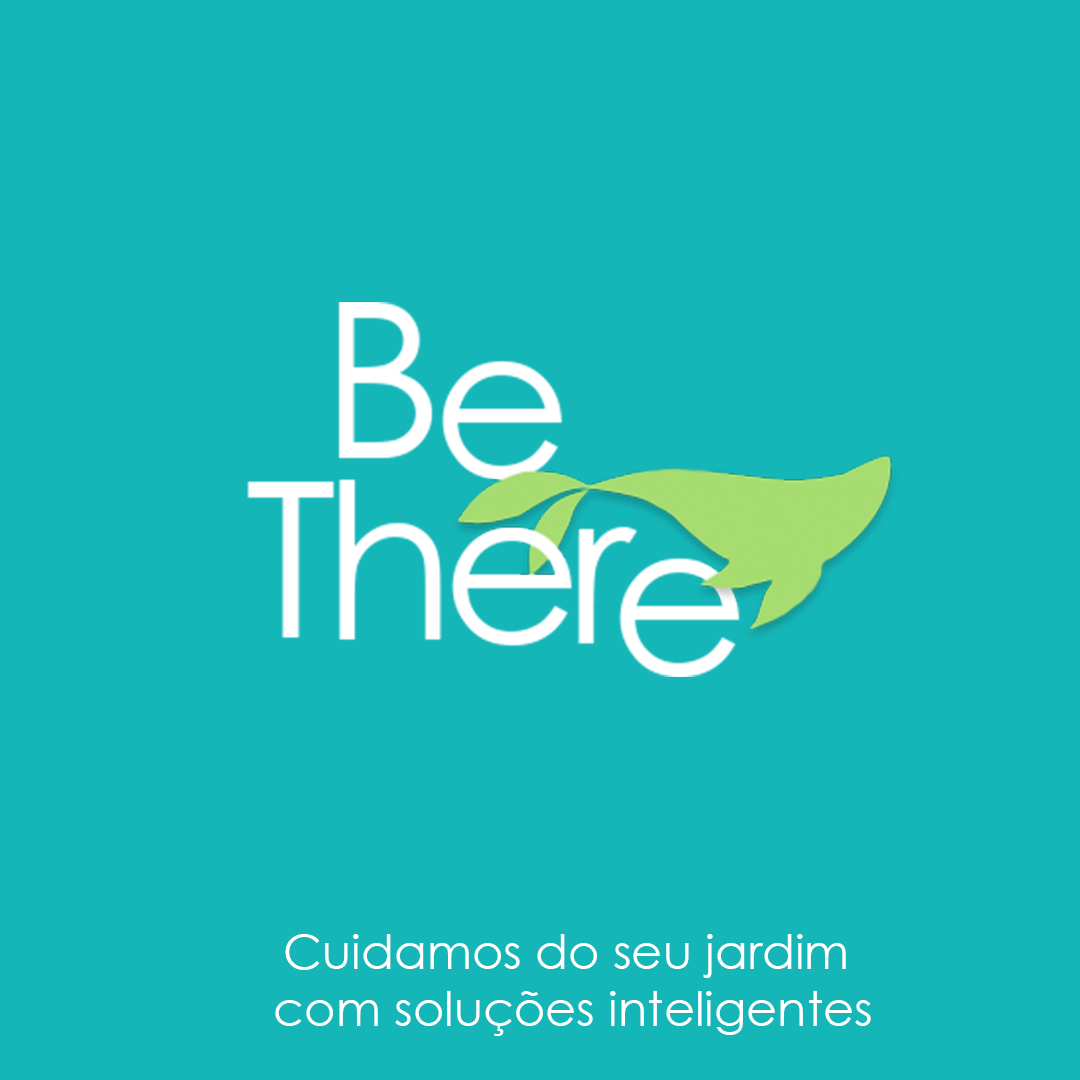
<style>
.page{position:relative;width:1080px;height:1080px;background:#15b6b8}
.page>*{position:absolute;margin:0}
.t1{font:48px "CenturyGothic";color:#ffffff}
</style>
<div class="page">
<p class="t1" style="left:275px;top:934px;width:596px;height:102px;text-align:center">Cuidamos do seu jardim <br>com soluções inteligentes</p>
</div>
